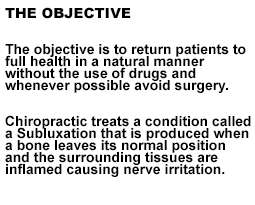
<style>
.page{position:relative;width:255px;height:205px;background:#ffffff}
.page>*{position:absolute;margin:0}
.t1{font:14px/12px "Arial-BoldMT";color:#000000}
.t2{font:14px/12px "Arial-Black";color:#000000}
</style>
<div class="page">
<p class="t1" style="left:5px;top:7px;width:246px;height:170px"><span class="t2">THE OBJECTIVE<br><br><br></span>The objective is to return patients to full health in a natural manner <br>without the use of drugs and <br>whenever possible avoid surgery.<br><br><br>Chiropractic treats a condition called a Subluxation that is produced when a bone leaves its normal position <br>and the surrounding tissues are <br>inflamed causing nerve irritation.</p>
</div>
